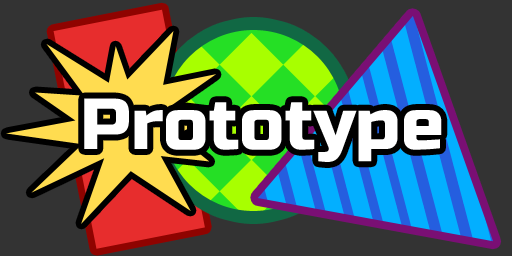
<style>
.page{position:relative;width:512px;height:256px;background:#333333}
.page>*{position:absolute;margin:0}
.t1{font:72px "RussoOne-Regular";color:#ffffff}
</style>
<div class="page">
<p class="t1" style="left:84px;top:98px;width:358px;height:64px">Prototype</p>
</div>
